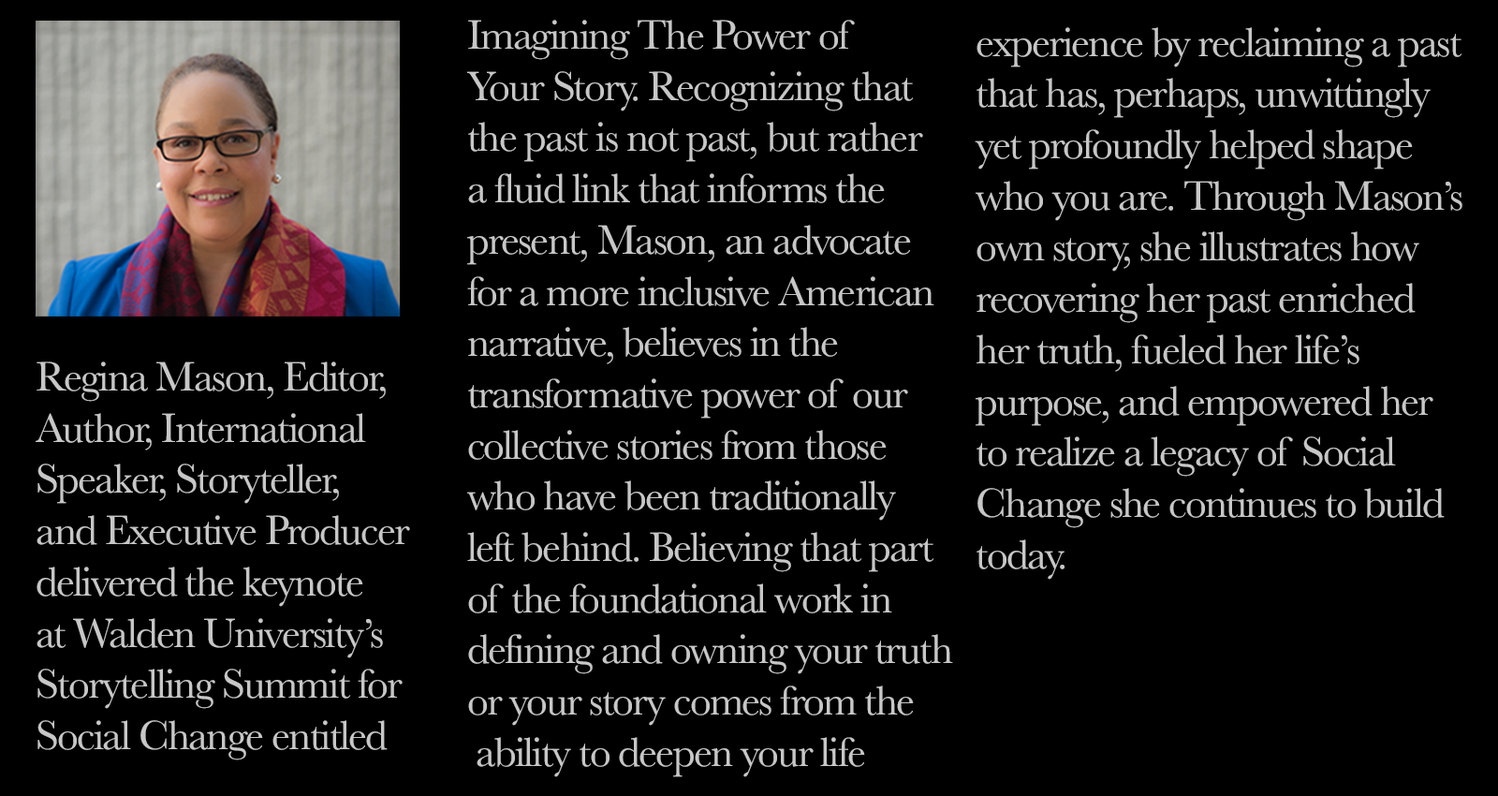
<style>
.page{position:relative;width:1498px;height:796px;background:#000000}
.page>*{position:absolute;margin:0}
.t1{font:42.7px "Baskerville";letter-spacing:-0.04em;color:#c7c7c7}
</style>
<div class="page">
<p class="t1" style="left:467px;top:20px;width:486px;height:757px">Imagining The Power of <br>Your Story. Recognizing that <br>the past is not past, but rather <br>a fluid link that informs the <br>present, Mason, an advocate <br>for a more inclusive American <br>narrative, believes in the <br>transformative power of our <br>collective stories from those <br>who have been traditionally<br>left behind. Believing that part <br>of the foundational work in <br>defining and owning your truth <br>or your story comes from the<br> ability to deepen your life</p>
<p class="t1" style="left:975px;top:27px;width:488px;height:553px">experience by reclaiming a past<br>that has, perhaps, unwittingly <br>yet profoundly helped shape <br>who you are. Through Mason’s <br>own story, she illustrates how <br>recovering her past enriched <br>her truth, fueled her life’s <br>purpose, and empowered her <br>to realize a legacy of Social <br>Change she continues to build <br>today.</p>
<p class="t1" style="left:36px;top:361px;width:374px;height:399px">Regina Mason, Editor, <br>Author, International <br>Speaker, Storyteller, <br>and Executive Producer <br>delivered the keynote <br>at Walden University’s <br>Storytelling Summit for <br>Social Change entitled</p>
</div>
